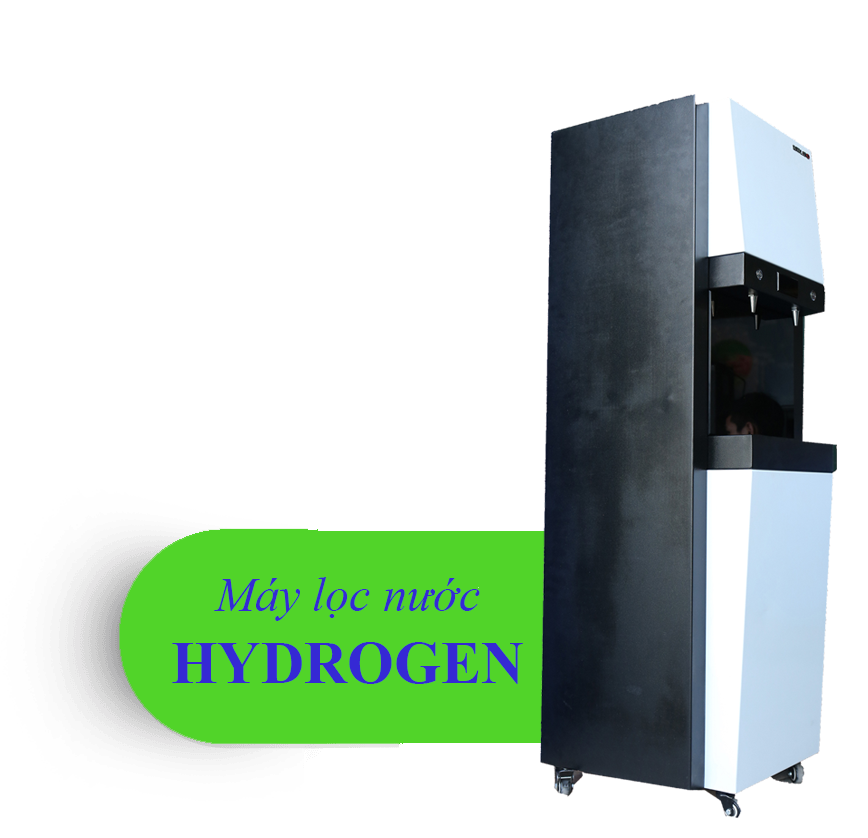
<style>
.page{position:relative;width:868px;height:838px;background:#ffffff}
.page>*{position:absolute;margin:0}
.t1{font:48px "TimesNewRomanPS-ItalicMT";color:#3529d4}
.t2{font:60px "TimesNewRomanPS-BoldMT";color:#3529d4}
</style>
<div class="page">
<p class="t1" style="left:172px;top:577px;width:351px;height:107px;text-align:center">Máy lọc nước<br><span class="t2">HYDROGEN</span></p>
</div>
